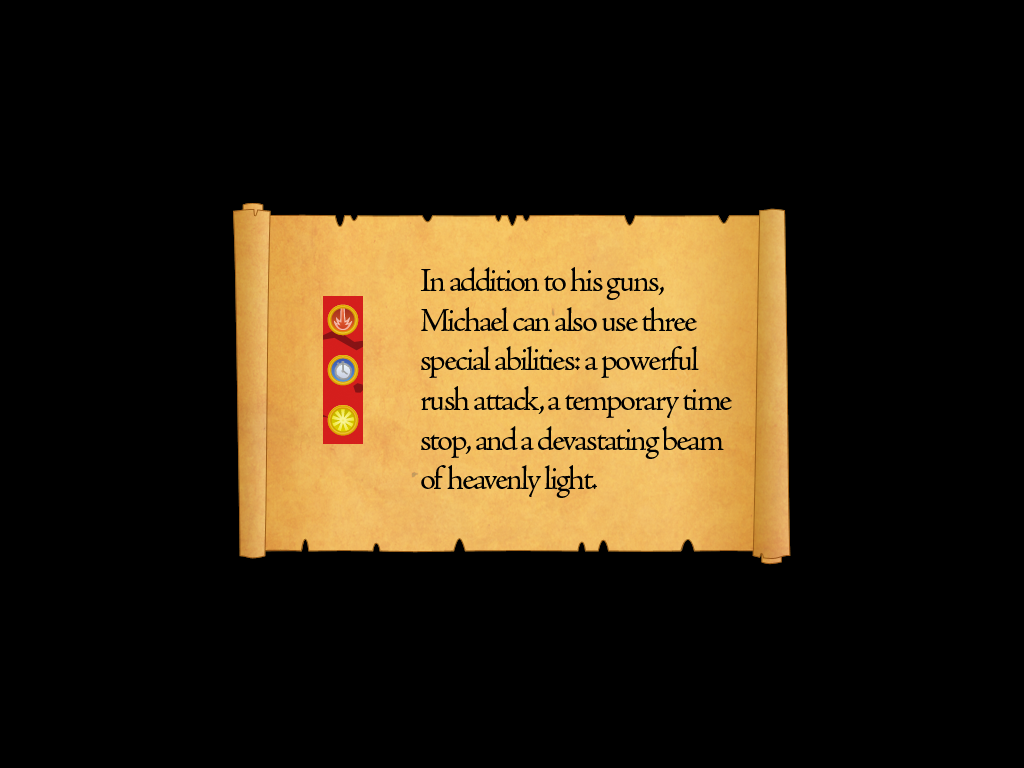
<style>
.page{position:relative;width:1024px;height:768px;background:#000000}
.page>*{position:absolute;margin:0}
.t1{font:33px "AJensonPro-Regular";letter-spacing:-0.06em;color:#000000}
</style>
<div class="page">
<p class="t1" style="left:420px;top:267px;width:312px;height:231px">In addition to his guns, Michael can also use three special abilities: a powerful rush attack, a temporary time stop, and a devastating beam of heavenly light.</p>
</div>
